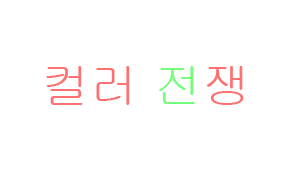
<style>
.page{position:relative;width:300px;height:173px;background:#ffffff}
.page>*{position:absolute;margin:0}
.t1{font:48px "Gulim";color:#fe7171}
.t2{font:48px "Gulim";color:#71fe78}
</style>
<div class="page">
<p class="t1" style="left:46px;top:66px;width:198px;height:39px">컬러 <span class="t2">전</span>쟁</p>
</div>
